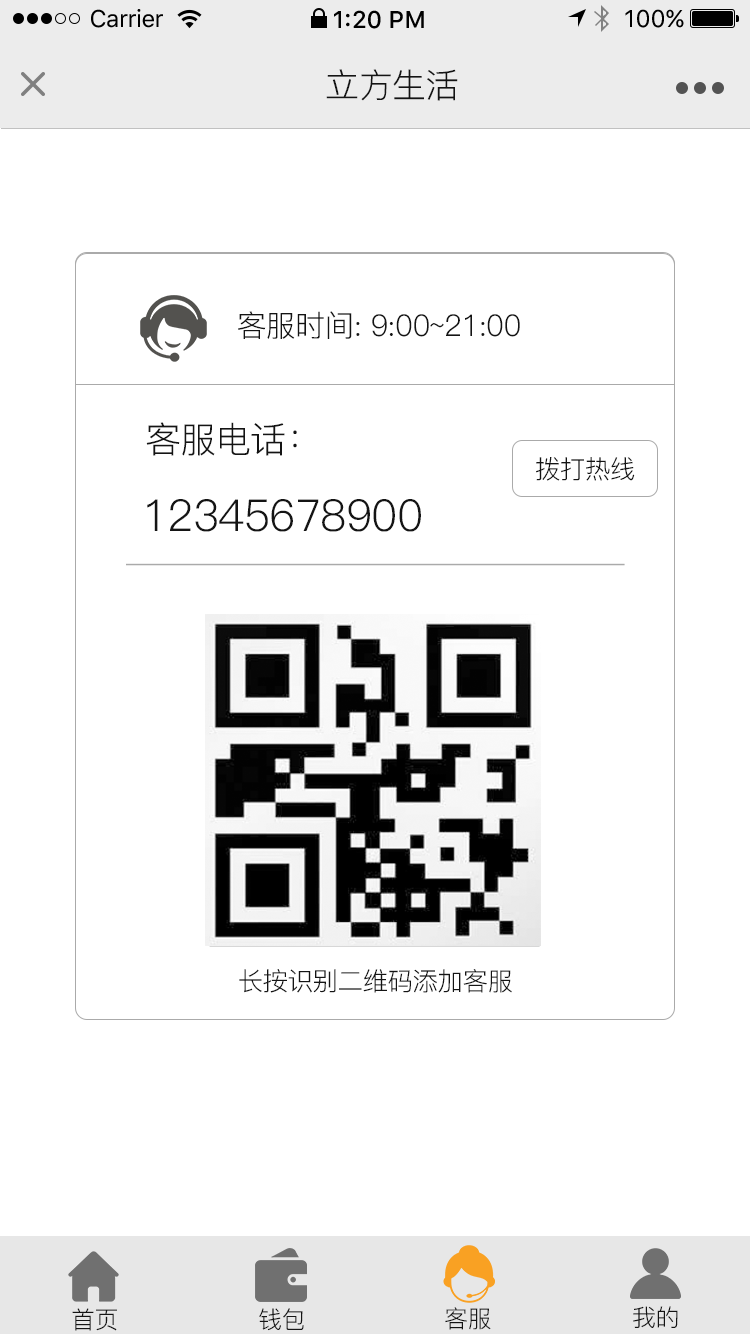
<style>
.page{position:relative;width:750px;height:1334px;background:#ffffff}
.page>*{position:absolute;margin:0}
.t1{font:24px "SFUIText-Regular";letter-spacing:-0.025em;color:#000000}
.t2{font:24px "SFUIText-Medium";color:#000000}
.t3{font:24px "SFUIText-Regular";color:#000000}
.t4{font:34px "PingFang-SC-Regular";letter-spacing:-0.02em;color:#141414}
.t5{font:30px "PingFang-SC-Regular";letter-spacing:-0.02em;color:#141414}
.t6{font:36px "PingFang-SC-Regular";letter-spacing:-0.02em;color:#141414}
.t7{font:25.5px "PingFang-SC-Regular";letter-spacing:-0.02em;color:#141414}
.t8{font:44px "PingFang-SC-Regular";letter-spacing:-0.02em;color:#141414}
.t9{font:24px "PingFang-SC-Regular";letter-spacing:-0.02em;color:#141414}
</style>
<div class="page">
<p class="t1" style="left:91px;top:9px;width:72px;height:19px">Carrier</p>
<p class="t2" style="left:334px;top:10px;width:90px;height:19px">1:20 PM</p>
<p class="t3" style="left:625px;top:9px;width:59px;height:19px">100%</p>
<p class="t4" style="left:326px;top:69px;width:132px;height:32px">立方生活</p>
<p class="t5" style="left:238px;top:311px;width:282px;height:28px">客服时间: 9:00~21:00</p>
<p class="t6" style="left:146px;top:422px;width:151px;height:34px">客服电话：</p>
<p class="t7" style="left:536px;top:457px;width:99px;height:24px">拨打热线</p>
<p class="t8" style="left:147px;top:499px;width:274px;height:33px">12345678900</p>
<p class="t7" style="left:239px;top:969px;width:273px;height:24px">长按识别二维码添加客服</p>
<p class="t9" style="left:72px;top:1308px;width:45px;height:23px">首页</p>
<p class="t9" style="left:259px;top:1308px;width:45px;height:23px">钱包</p>
<p class="t9" style="left:445px;top:1307px;width:46px;height:23px">客服</p>
<p class="t9" style="left:633px;top:1306px;width:45px;height:22px">我的</p>
</div>
